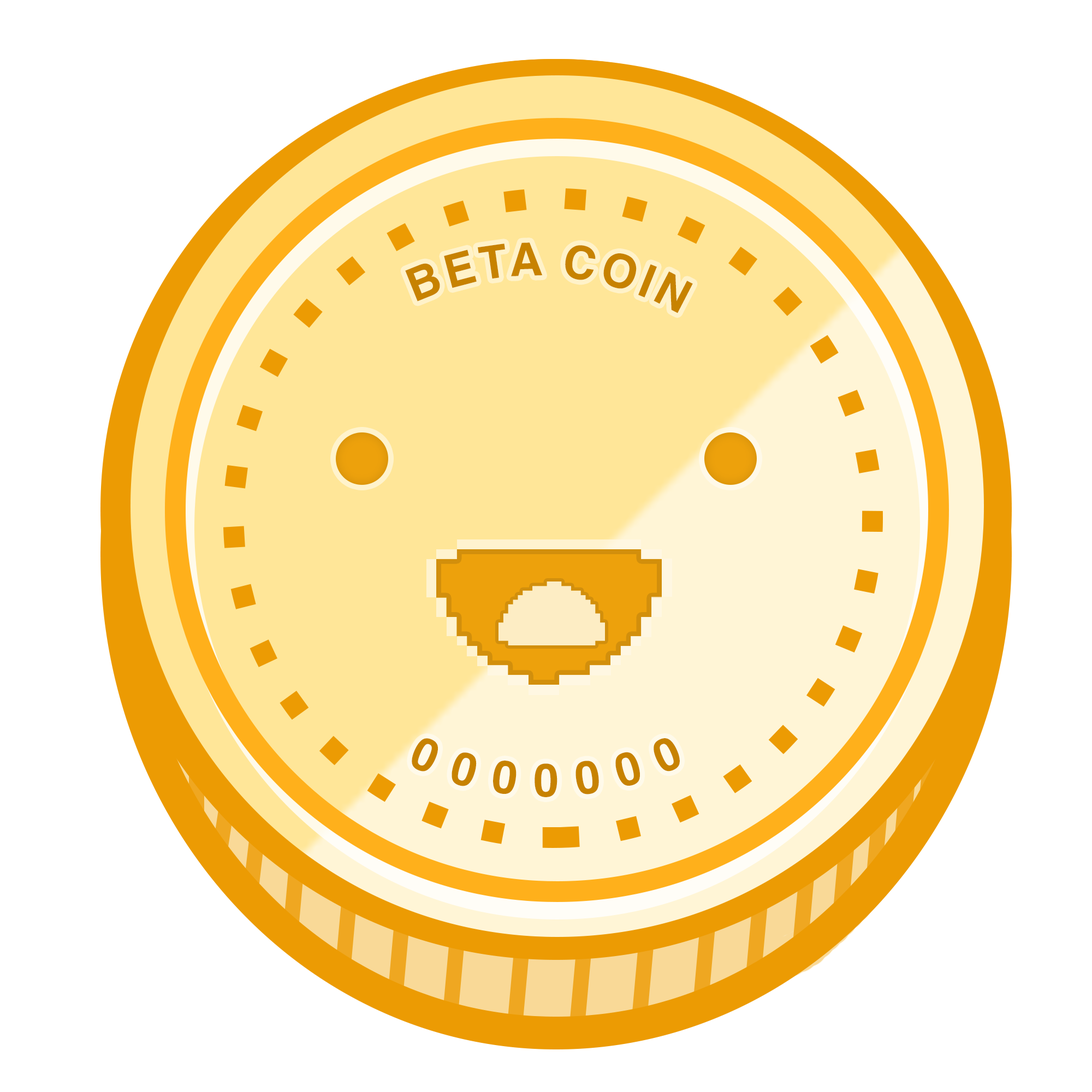
<style>
.page{position:relative;width:1092px;height:1092px;background:#ffffff}
.page>*{position:absolute;margin:0}
.t1{font:45.9px "Helvetica-Bold";letter-spacing:0.08em;color:#c78200}
.t2{font:45.9px "Helvetica-Bold";letter-spacing:0.3em;color:#c78200}
</style>
<div class="page">
<p class="t1" style="left:405px;top:242px;width:288px;height:71px;rotate:-142deg">BETA COIN</p>
<p class="t2" style="left:412px;top:738px;width:268px;height:59px;rotate:-1deg">0000000</p>
</div>
